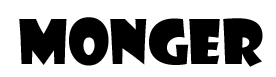
<style>
.page{position:relative;width:276px;height:77px;background:#ffffff}
.page>*{position:absolute;margin:0}
.t1{font:60px "ShowcardGothic-Reg";color:#000000}
</style>
<div class="page">
<p class="t1" style="left:19px;top:17px;width:244px;height:50px">MONGER</p>
</div>
